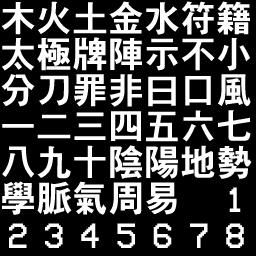
<style>
.page{position:relative;width:256px;height:256px;background:#000000}
.page>*{position:absolute;margin:0}
.t1{font:36px/36px "H2gtrE";color:#ffffff}
.t2{font:36px/36px "VCROSDMono";letter-spacing:0.42em;color:#ffffff}
</style>
<div class="page">
<p class="t1" style="left:1px;top:1px;width:251px;height:214px">木火土金水符籍<br>太極牌陣示不小<br>分刀罪非曰口風<br>一二三四五六七<br>八九十陰陽地勢<br>學脈氣周易</p>
<p class="t2" style="left:9px;top:187px;width:235px;height:61px">1<br>2345678</p>
</div>
